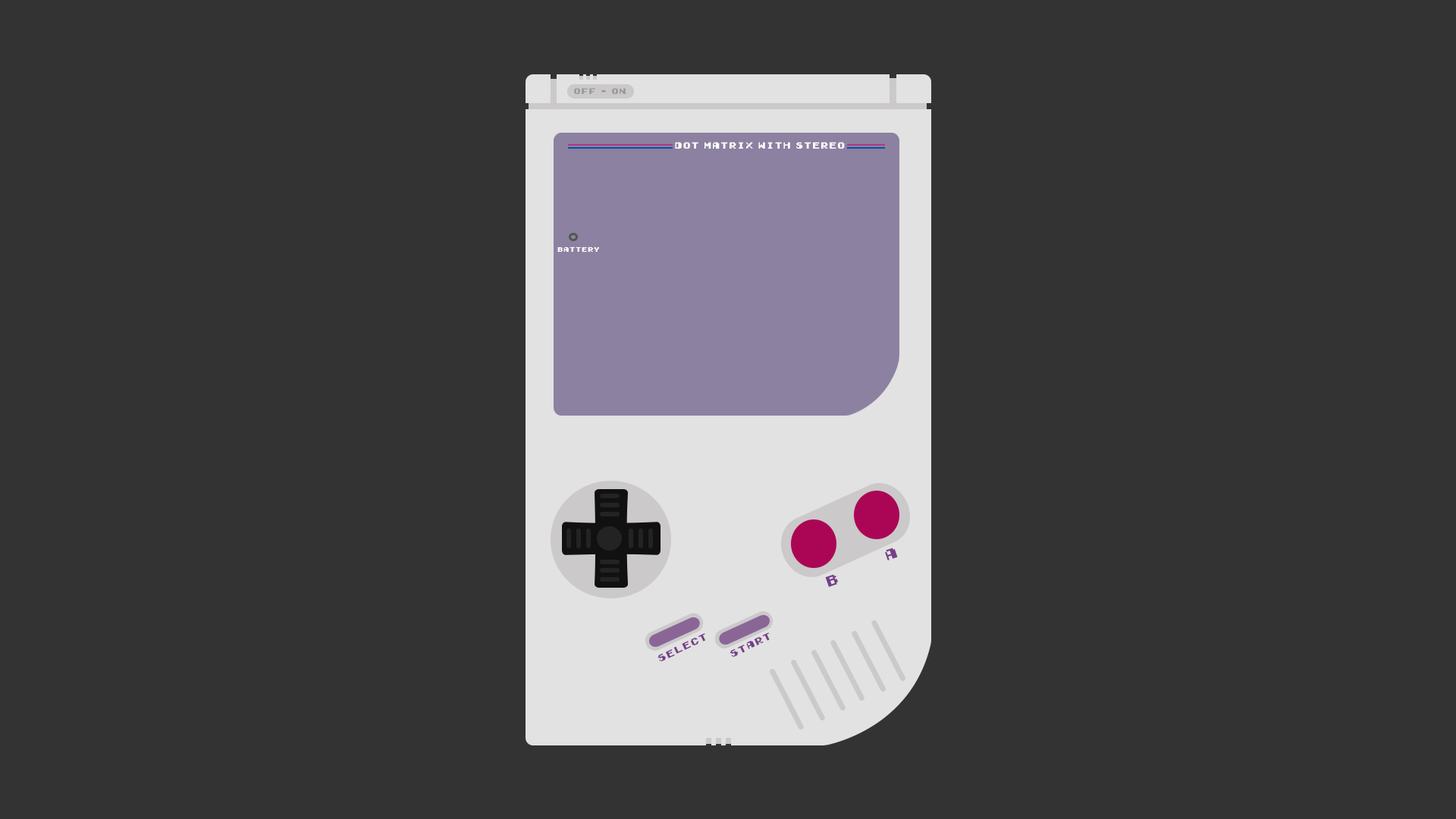
<style>
.page{position:relative;width:1456px;height:819px;background:#333333}
.page>*{position:absolute;margin:0}
.t1{font:7.6px "Early-GameBoy";color:#959595}
.t2{font:8.3px "Early-GameBoy";color:#ffffff}
.t3{font:6.1px "Early-GameBoy";color:#ffffff}
.t4{font:13.6px "Early-GameBoy";color:#753e89}
.t5{font:9.1px "Early-GameBoy";color:#753e89}
</style>
<div class="page">
<p class="t1" style="left:574px;top:88px;width:52px;height:6px">OFF - ON</p>
<p class="t2" style="left:675px;top:142px;width:170px;height:7px">Dot Matrix with Stereo</p>
<p class="t3" style="left:557px;top:246px;width:42px;height:7px">Battery</p>
<p class="t4" style="left:885px;top:548px;width:13px;height:12px;rotate:-19deg">A</p>
<p class="t4" style="left:825px;top:574px;width:13px;height:13px;rotate:-19deg">B</p>
<p class="t5" style="left:657px;top:633px;width:48px;height:29px;rotate:-26deg">SELECT</p>
<p class="t5" style="left:730px;top:632px;width:40px;height:25px;rotate:-26deg">START</p>
</div>
